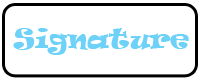
<style>
.page{position:relative;width:200px;height:80px;background:#ffffff}
.page>*{position:absolute;margin:0}
.t1{font:26px "Ravie";color:#6ed1f8}
</style>
<div class="page">
<p class="t1" style="left:13px;top:28px;width:176px;height:27px">Signature</p>
</div>
